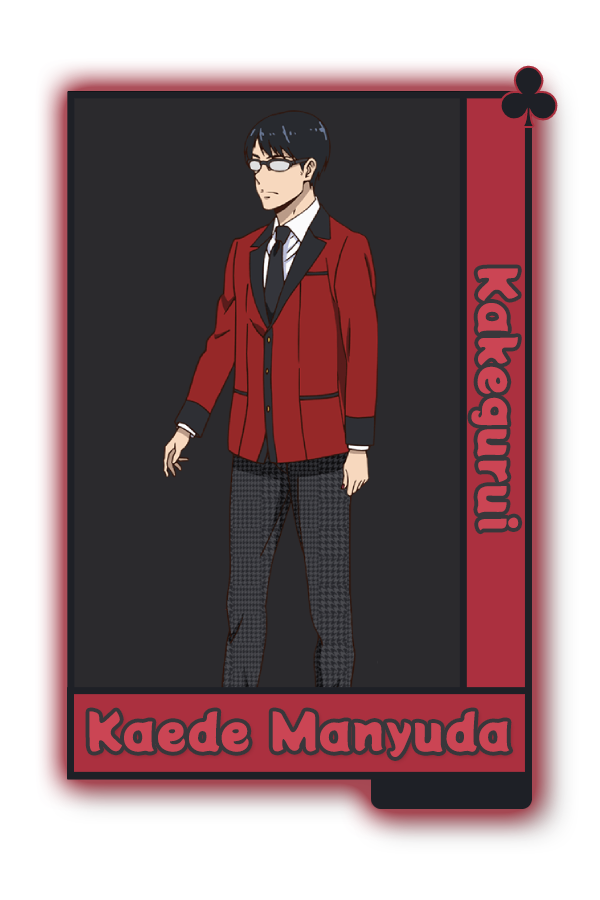
<style>
.page{position:relative;width:600px;height:900px;background:#2b2a2d}
.page>*{position:absolute;margin:0}
.t1{font:80px "DejaVuSans";color:#1e2026}
.t2{font:50px "PottaOne-Regular";color:#cb4554}
</style>
<div class="page">
<p class="t1" style="left:501px;top:67px;width:55px;height:59px">♣️</p>
<p class="t2" style="left:471px;top:268px;width:48px;height:263px;rotate:90deg">Kakegurui</p>
<p class="t2" style="left:89px;top:711px;width:421px;height:47px">Kaede Manyuda</p>
</div>
